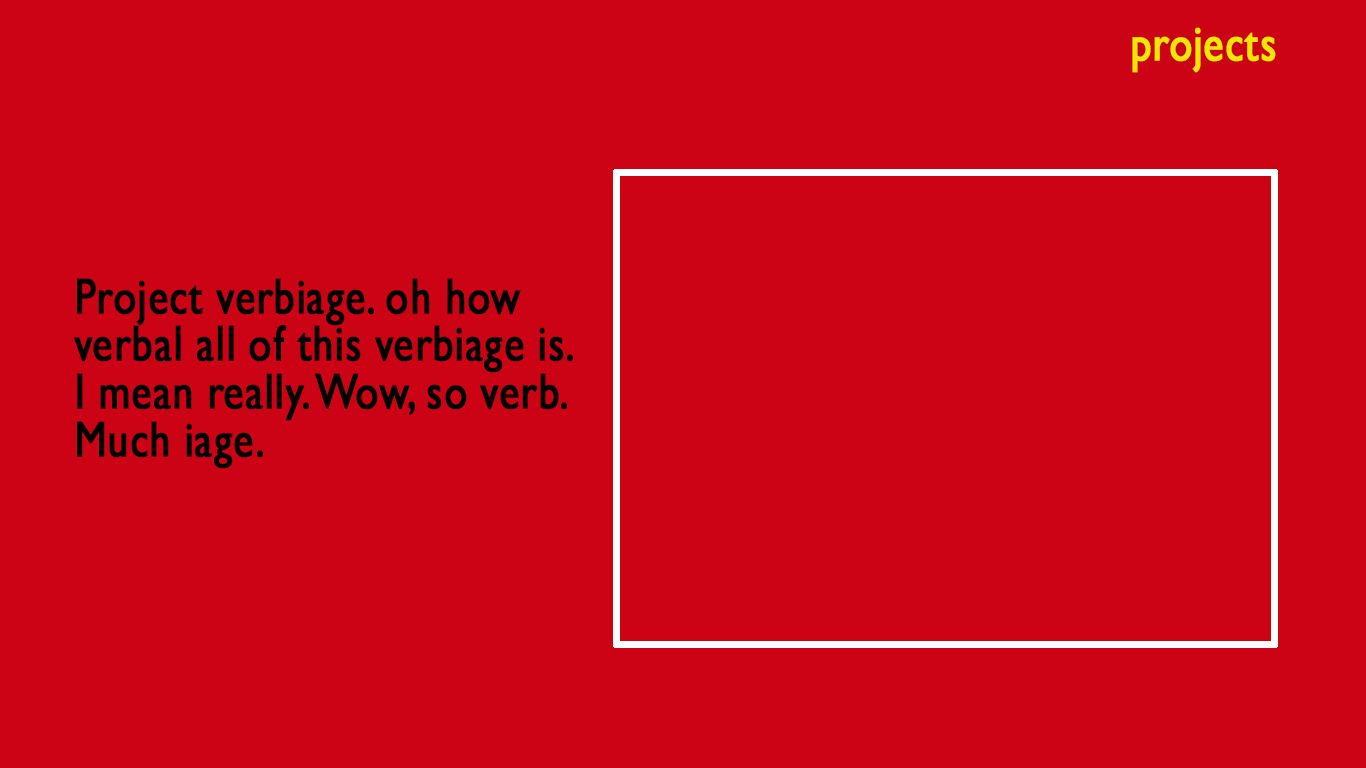
<style>
.page{position:relative;width:1366px;height:768px;background:#cc0215}
.page>*{position:absolute;margin:0}
.t1{font:50.4px "GillSansMT";letter-spacing:0.01em;color:#f3e504;font-weight:bold;scale:0.81 1}
.t2{font:50.4px/16px "GillSansMT";letter-spacing:0.01em;color:#000000;font-weight:bold;scale:0.81 1}
</style>
<div class="page">
<p class="t1" style="left:1132px;top:27px;width:144px;height:46px">projects</p>
<p class="t2" style="left:74px;top:278px;width:499px;height:191px">Project verbiage. oh how <br><br><br>verbal all of this verbiage is.<br><br><br>I mean really. Wow, so verb.<br><br><br>Much iage.</p>
</div>
